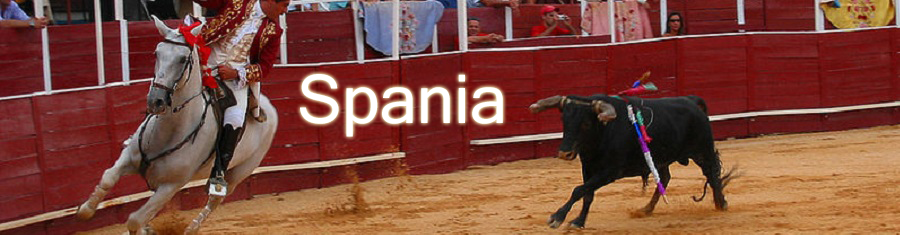
<style>
.page{position:relative;width:900px;height:235px}
.page>*{position:absolute;margin:0}
.t1{font:75px "Vrinda";color:#ffffff}
</style>
<div class="page">
<p class="t1" style="left:300px;top:74px;width:203px;height:63px">Spania</p>
</div>
